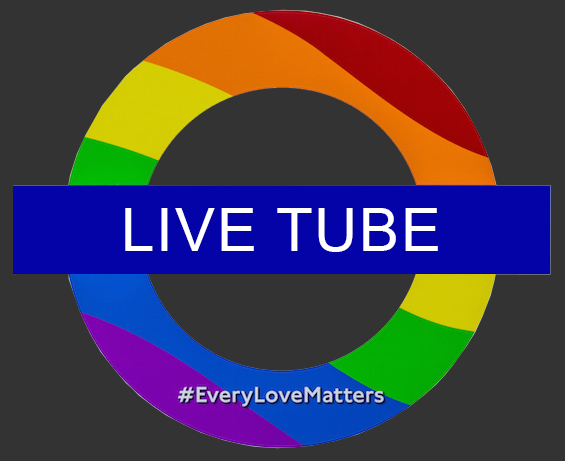
<style>
.page{position:relative;width:565px;height:461px;background:#333333}
.page>*{position:absolute;margin:0}
.t1{font:60px "ArialMT";letter-spacing:0.03em;color:#ffffff}
</style>
<div class="page">
<p class="t1" style="left:125px;top:208px;width:313px;height:44px">LIVE TUBE</p>
</div>
